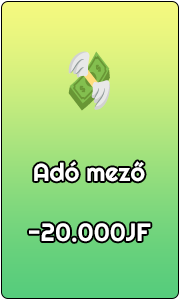
<style>
.page{position:relative;width:180px;height:300px}
.page>*{position:absolute;margin:0}
.t1{font:25px "Righteous-Regular";color:#ffffff}
</style>
<div class="page">
<p class="t1" style="left:29px;top:161px;width:122px;height:81px;text-align:center">Adó mező<br><br>-20.000JF</p>
</div>
